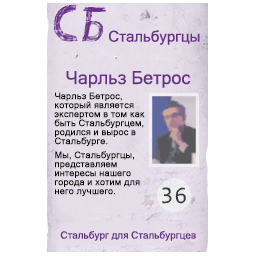
<style>
.page{position:relative;width:256px;height:256px;background:#ffffff}
.page>*{position:absolute;margin:0}
.t1{font:15px "MicrosoftSansSerif";color:#683088}
.t2{font:18px "MicrosoftSansSerif";color:#683088}
.t3{font:9px/9px "MicrosoftSansSerif";color:#000000;font-weight:bold}
.t4{font:10px "MicrosoftSansSerif";color:#683088}
</style>
<div class="page">
<p class="t1" style="left:109px;top:30px;width:91px;height:15px">Стальбургцы</p>
<p class="t2" style="left:66px;top:71px;width:125px;height:17px">Чарльз Бетрос</p>
<p class="t3" style="left:54px;top:92px;width:91px;height:54px">Чарльз Бетрос, который является экспертом в том как быть Стальбургцем, родился и вырос в Стальбурге.</p>
<p class="t3" style="left:55px;top:151px;width:85px;height:45px">Мы, Стальбургцы, представляем интересы нашего города и хотим для него лучшего.</p>
<p class="t4" style="left:60px;top:231px;width:136px;height:10px">Стальбург для Стальбургцев</p>
</div>
